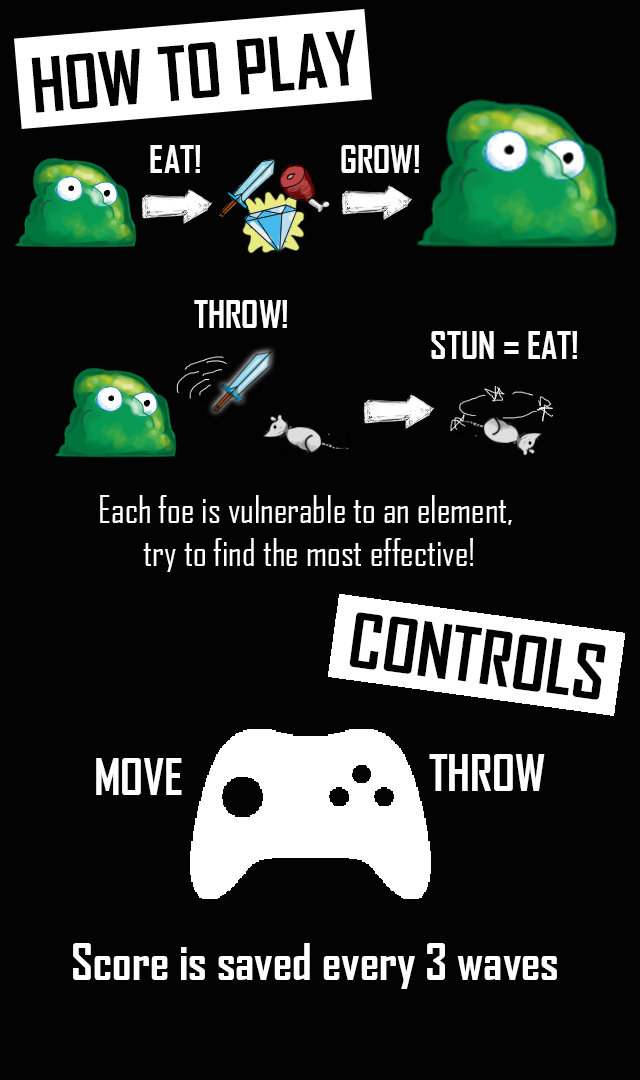
<style>
.page{position:relative;width:640px;height:1080px;background:#030303}
.page>*{position:absolute;margin:0}
.t1{font:72px "AgencyFB-Bold";color:#000000}
.t2{font:36px "AgencyFB-Bold";color:#ffffff}
.t3{font:36px "AgencyFB-Reg";color:#ffffff}
.t4{font:48px "AgencyFB-Bold";color:#ffffff}
</style>
<div class="page">
<p class="t1" style="left:31px;top:29px;width:325px;height:84px;rotate:-5deg">HOW TO PLAY</p>
<p class="t2" style="left:150px;top:145px;width:50px;height:28px">EAT!</p>
<p class="t2" style="left:341px;top:145px;width:78px;height:28px">GROW!</p>
<p class="t2" style="left:194px;top:300px;width:93px;height:28px">THROW!</p>
<p class="t2" style="left:431px;top:331px;width:146px;height:28px">STUN = EAT!</p>
<p class="t3" style="left:100px;top:495px;width:412px;height:77px;text-align:center">Each foe is vulnerable to an element, <br>try to find the most effective!</p>
<p class="t1" style="left:349px;top:612px;width:257px;height:88px;rotate:8deg">CONTROLS</p>
<p class="t4" style="left:96px;top:758px;width:86px;height:37px">MOVE</p>
<p class="t4" style="left:429px;top:754px;width:116px;height:37px">THROW</p>
<p class="t4" style="left:73px;top:943px;width:484px;height:46px">Score is saved every 3 waves</p>
</div>
